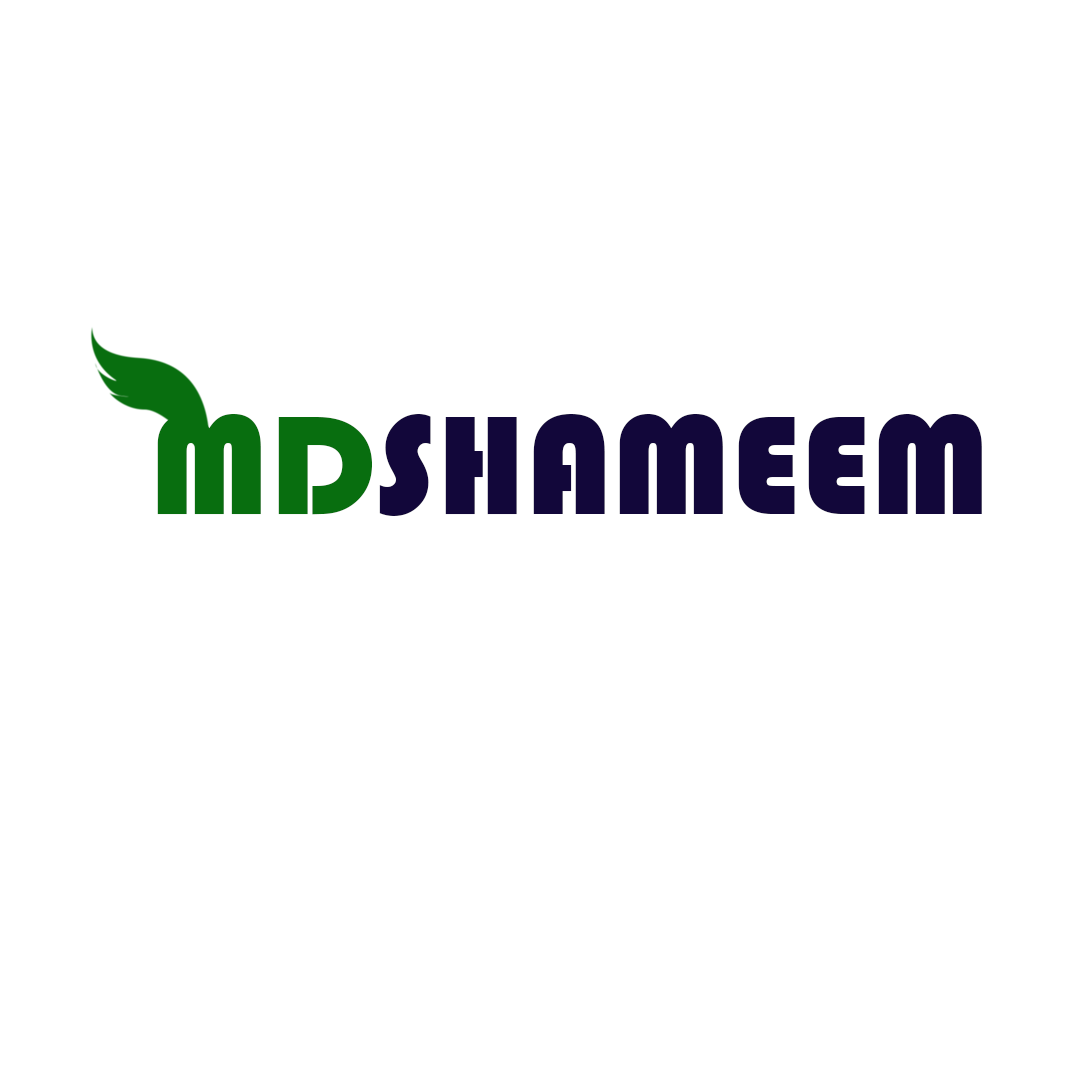
<style>
.page{position:relative;width:1080px;height:1080px;background:#ffffff}
.page>*{position:absolute;margin:0}
.t1{font:145.8px "Bauhaus93";color:#12073a;text-transform:uppercase}
.t2{font:145.8px "Bauhaus93";color:#086e0f;text-transform:uppercase}
</style>
<div class="page">
<p class="t1" style="left:157px;top:414px;width:825px;height:102px"><span class="t2">md</span>shameem</p>
</div>
